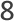
<style>
.page{position:relative;width:14px;height:21px;background:#ffffff}
.page>*{position:absolute;margin:0}
.t1{font:30px "Calibri";color:#3c3c3c}
</style>
<div class="page">
<p class="t1" style="left:0px;top:0px;width:14px;height:21px">8</p>
</div>
